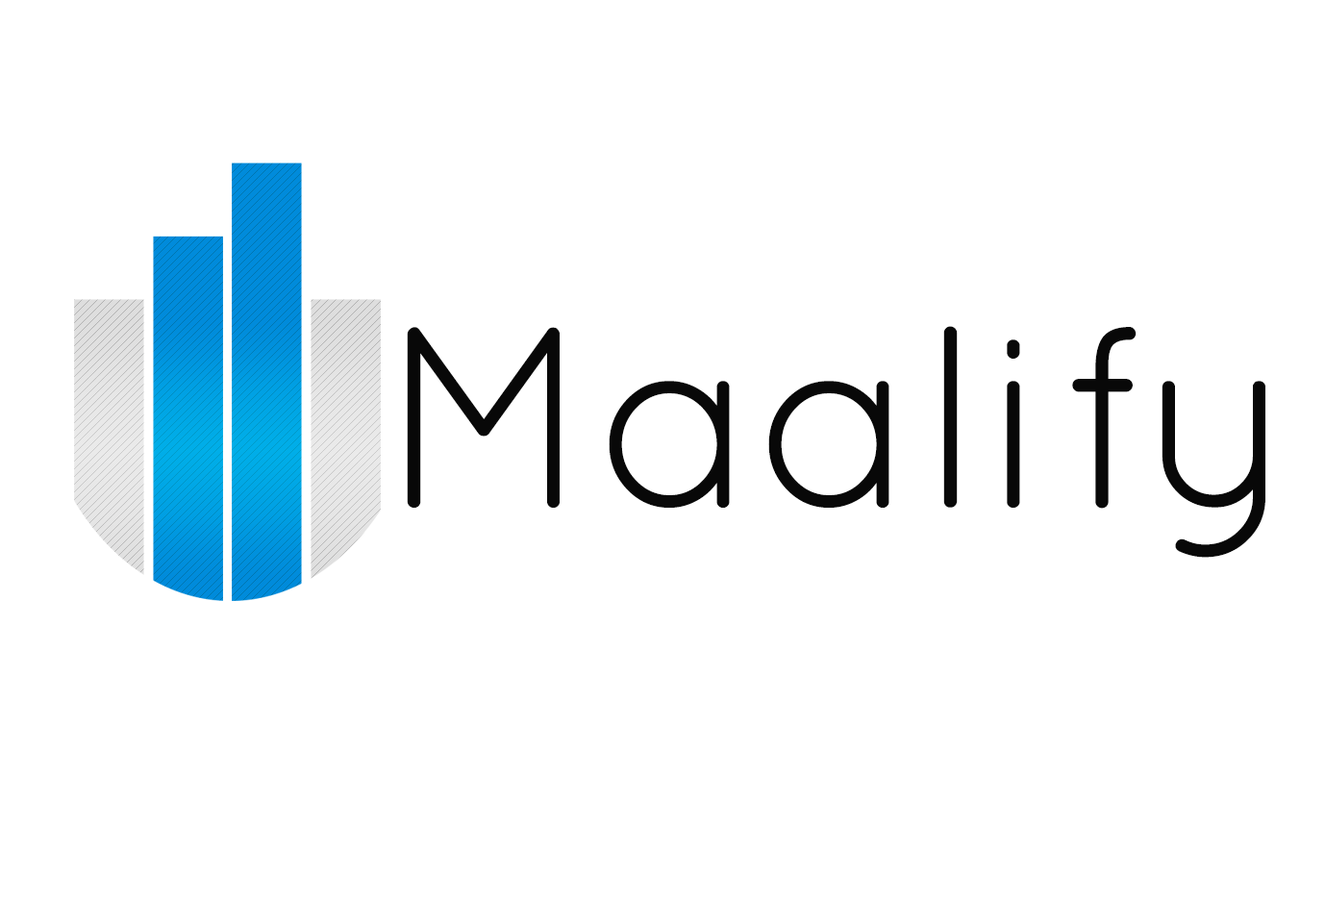
<style>
.page{position:relative;width:1325px;height:900px;background:#ffffff}
.page>*{position:absolute;margin:0}
.t1{font:258.4px "Quicksand-Regular";color:#080808}
</style>
<div class="page">
<p class="t1" style="left:407px;top:326px;width:858px;height:232px">Maalify</p>
</div>
